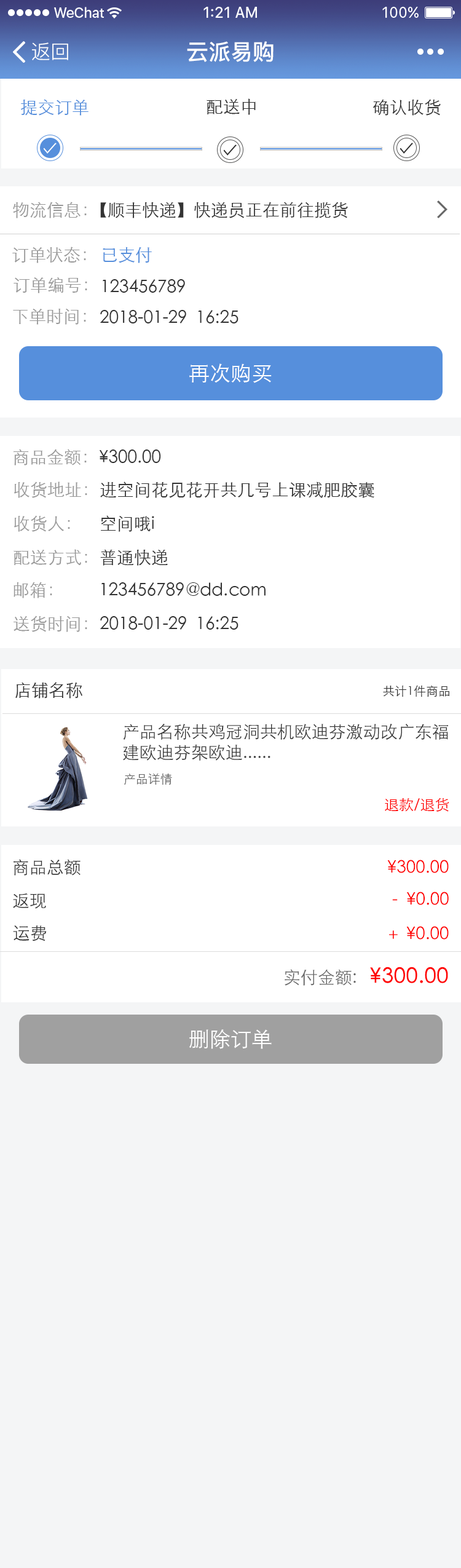
<style>
.page{position:relative;width:461px;height:1568px;background:#ffffff}
.page>*{position:absolute;margin:0}
.t1{font:22.1px "PingFang-SC-Bold";color:#ffffff}
.t2{font:19.7px "PingFang-SC-Regular";color:#ffffff}
.t3{font:17.2px "STXihei";color:#568fdc}
.t4{font:17.2px "STXihei";color:#333333}
.t5{font:17.2px "STXihei";color:#999999}
.t6{font:20.9px "STXihei";color:#ffffff}
.t7{font:12.3px "STXihei";color:#333333}
.t8{font:17.2px "STXihei";color:#373737}
.t9{font:12.3px "STXihei";color:#666666}
.t10{font:14.8px "STXihei";color:#ff0000}
.t11{font:17.2px "STXihei";color:#ff0000}
.t12{font:20.9px "STXihei";color:#ff0000;font-weight:bold}
.t13{font:17.2px "STXihei";color:#666666}
</style>
<div class="page">
<p class="t1" style="left:187px;top:41px;width:87px;height:21px">云派易购</p>
<p class="t2" style="left:32px;top:42px;width:36px;height:18px">返回</p>
<p class="t3" style="left:21px;top:99px;width:68px;height:17px">提交订单</p>
<p class="t4" style="left:207px;top:98px;width:49px;height:17px">配送中</p>
<p class="t4" style="left:373px;top:99px;width:68px;height:17px">确认收货</p>
<p class="t5" style="left:13px;top:202px;width:74px;height:16px">物流信息：</p>
<p class="t4" style="left:100px;top:202px;width:84px;height:16px">【顺丰快递】</p>
<p class="t4" style="left:194px;top:202px;width:154px;height:16px">快递员正在前往揽货</p>
<p class="t5" style="left:12px;top:247px;width:74px;height:16px">订单状态：</p>
<p class="t3" style="left:103px;top:247px;width:49px;height:16px">已支付</p>
<p class="t5" style="left:14px;top:277px;width:73px;height:16px">订单编号：</p>
<p class="t4" style="left:103px;top:279px;width:82px;height:14px">123456789</p>
<p class="t5" style="left:13px;top:308px;width:73px;height:17px">下单时间：</p>
<p class="t4" style="left:100px;top:310px;width:139px;height:13px">2018-01-29  16:25</p>
<p class="t6" style="left:189px;top:363px;width:83px;height:20px">再次购买</p>
<p class="t5" style="left:14px;top:449px;width:73px;height:16px">商品金额：</p>
<p class="t4" style="left:100px;top:449px;width:61px;height:14px">¥300.00</p>
<p class="t5" style="left:14px;top:481px;width:73px;height:17px">收货地址：</p>
<p class="t4" style="left:100px;top:481px;width:274px;height:17px">进空间花见花开共几号上课减肥胶囊</p>
<p class="t5" style="left:14px;top:515px;width:56px;height:17px">收货人：</p>
<p class="t4" style="left:101px;top:515px;width:53px;height:17px">空间哦i</p>
<p class="t5" style="left:14px;top:549px;width:73px;height:16px">配送方式：</p>
<p class="t4" style="left:100px;top:549px;width:68px;height:17px">普通快递</p>
<p class="t5" style="left:14px;top:582px;width:38px;height:16px">邮箱：</p>
<p class="t4" style="left:101px;top:582px;width:165px;height:14px">123456789@dd.com</p>
<p class="t5" style="left:14px;top:616px;width:73px;height:16px">送货时间：</p>
<p class="t4" style="left:100px;top:616px;width:139px;height:14px">2018-01-29  16:25</p>
<p class="t4" style="left:15px;top:682px;width:67px;height:17px">店铺名称</p>
<p class="t7" style="left:383px;top:685px;width:66px;height:12px">共计1件商品</p>
<p class="t8" style="left:123px;top:724px;width:325px;height:37px">产品名称共鸡冠洞共机欧迪芬激动改广东福建欧迪芬架欧迪......</p>
<p class="t9" style="left:124px;top:774px;width:48px;height:11px">产品详情</p>
<p class="t10" style="left:385px;top:798px;width:64px;height:14px">退款/退货</p>
<p class="t4" style="left:14px;top:859px;width:67px;height:17px">商品总额</p>
<p class="t11" style="left:387px;top:860px;width:62px;height:13px">¥300.00</p>
<p class="t4" style="left:13px;top:893px;width:33px;height:16px">返现</p>
<p class="t11" style="left:392px;top:892px;width:57px;height:13px">-  ¥0.00</p>
<p class="t4" style="left:13px;top:925px;width:34px;height:16px">运费</p>
<p class="t11" style="left:389px;top:926px;width:60px;height:14px">＋ ¥0.00</p>
<p class="t12" style="left:285px;top:967px;width:163px;height:19px"><span class="t13">实付金额:   </span>¥300.00</p>
<p class="t6" style="left:189px;top:1029px;width:83px;height:20px">删除订单</p>
</div>
